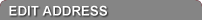
<style>
.page{position:relative;width:202px;height:20px;background:#858585}
.page>*{position:absolute;margin:0}
.t1{font:13.3px "Arial-BoldMT";color:#ffffff}
</style>
<div class="page">
<p class="t1" style="left:9px;top:5px;width:98px;height:11px">EDIT ADDRESS</p>
</div>
